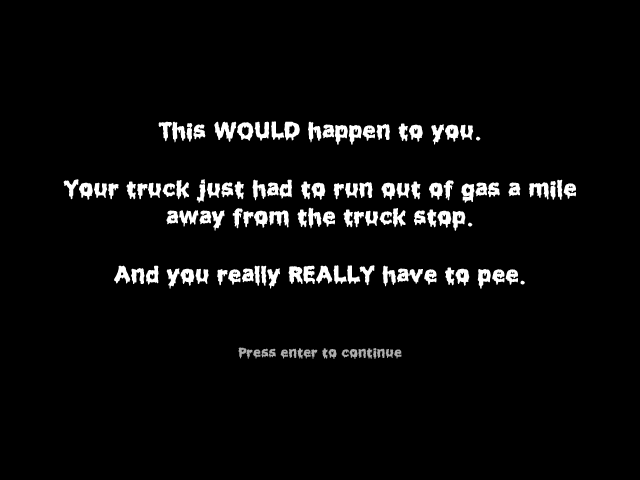
<style>
.page{position:relative;width:640px;height:480px;background:#000000}
.page>*{position:absolute;margin:0}
.t1{font:24px "Liquidismpart2";color:#ffffff}
.t2{font:14px "Liquidismpart2";color:#acacac}
</style>
<div class="page">
<p class="t1" style="left:63px;top:121px;width:513px;height:238px;text-align:center">This WOULD happen to you.<br><br>Your truck just had to run out of gas a mile<br>away from the truck stop.<br><br>And you really REALLY have to pee.<br><br><br><span class="t2">Press enter to continue</span></p>
</div>
